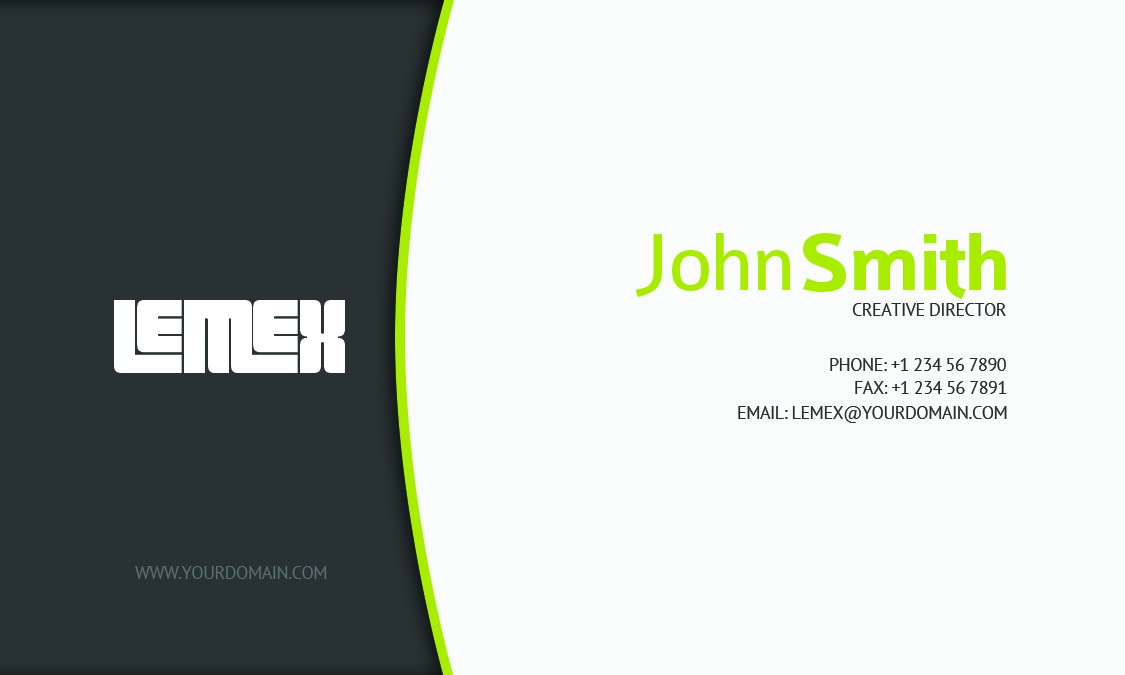
<style>
.page{position:relative;width:1125px;height:675px;background:#fafcfc}
.page>*{position:absolute;margin:0}
.t1{font:86px "Colaborate-Regular";letter-spacing:-0.025em;color:#a8ec00}
.t2{font:86px "Colaborate-Bold";letter-spacing:-0.025em;color:#a8ec00}
.t3{font:100px "Pincoyablack-Black";color:#ffffff}
.t4{font:18px "PTSans-Regular";letter-spacing:-0.025em;color:#262e30;text-transform:uppercase}
.t5{font:18px "PTSans-Regular";letter-spacing:-0.025em;color:#5d6f70;text-transform:uppercase}
</style>
<div class="page">
<p class="t1" style="left:635px;top:233px;width:155px;height:64px">John</p>
<p class="t2" style="left:803px;top:233px;width:203px;height:66px">Smith</p>
<p class="t3" style="left:114px;top:300px;width:231px;height:73px">lemex</p>
<p class="t4" style="left:852px;top:303px;width:154px;height:13px">creative director</p>
<p class="t4" style="left:830px;top:358px;width:176px;height:13px">phone: +1 234 56 7890</p>
<p class="t4" style="left:855px;top:381px;width:151px;height:13px">Fax: +1 234 56 7891</p>
<p class="t4" style="left:738px;top:406px;width:269px;height:17px">email: lemex@yourdomain.com</p>
<p class="t5" style="left:135px;top:566px;width:192px;height:13px">www.yourdomain.com</p>
</div>
